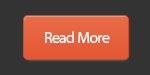
<style>
.page{position:relative;width:150px;height:75px;background:#333333}
.page>*{position:absolute;margin:0}
.t1{font:16px "MyriadPro-Regular";letter-spacing:-0.04em;color:#ffffff}
</style>
<div class="page">
<p class="t1" style="left:45px;top:31px;width:65px;height:12px">Read More</p>
</div>
